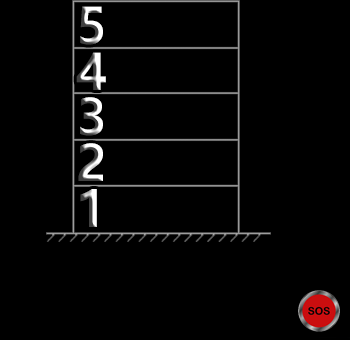
<style>
.page{position:relative;width:350px;height:340px;background:#000000}
.page>*{position:absolute;margin:0}
.t1{font:49.2px/45.8px "MicrosoftYaHei-Bold";letter-spacing:0.06em}
</style>
<div class="page">
<p class="t1" style="left:76px;top:6px;width:30px;height:221px">5<br>4<br>3<br>2<br>1</p>
</div>
